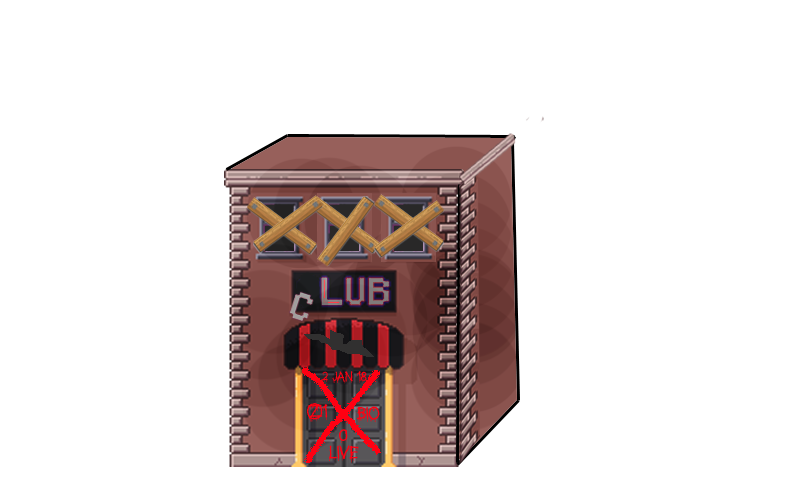
<style>
.page{position:relative;width:800px;height:500px;background:#ffffff}
.page>*{position:absolute;margin:0}
.t1{font:16px "Anti-Everything";color:#ff0012}
.t2{font:22px "Anti-Everything";color:#ff0012}
</style>
<div class="page">
<p class="t1" style="left:321px;top:371px;width:46px;height:13px">2 jan 18</p>
<p class="t2" style="left:307px;top:403px;width:21px;height:19px">Z1</p>
<p class="t2" style="left:357px;top:406px;width:23px;height:17px">bio</p>
<p class="t2" style="left:339px;top:429px;width:9px;height:14px">0</p>
<p class="t2" style="left:329px;top:445px;width:30px;height:18px">live</p>
</div>
